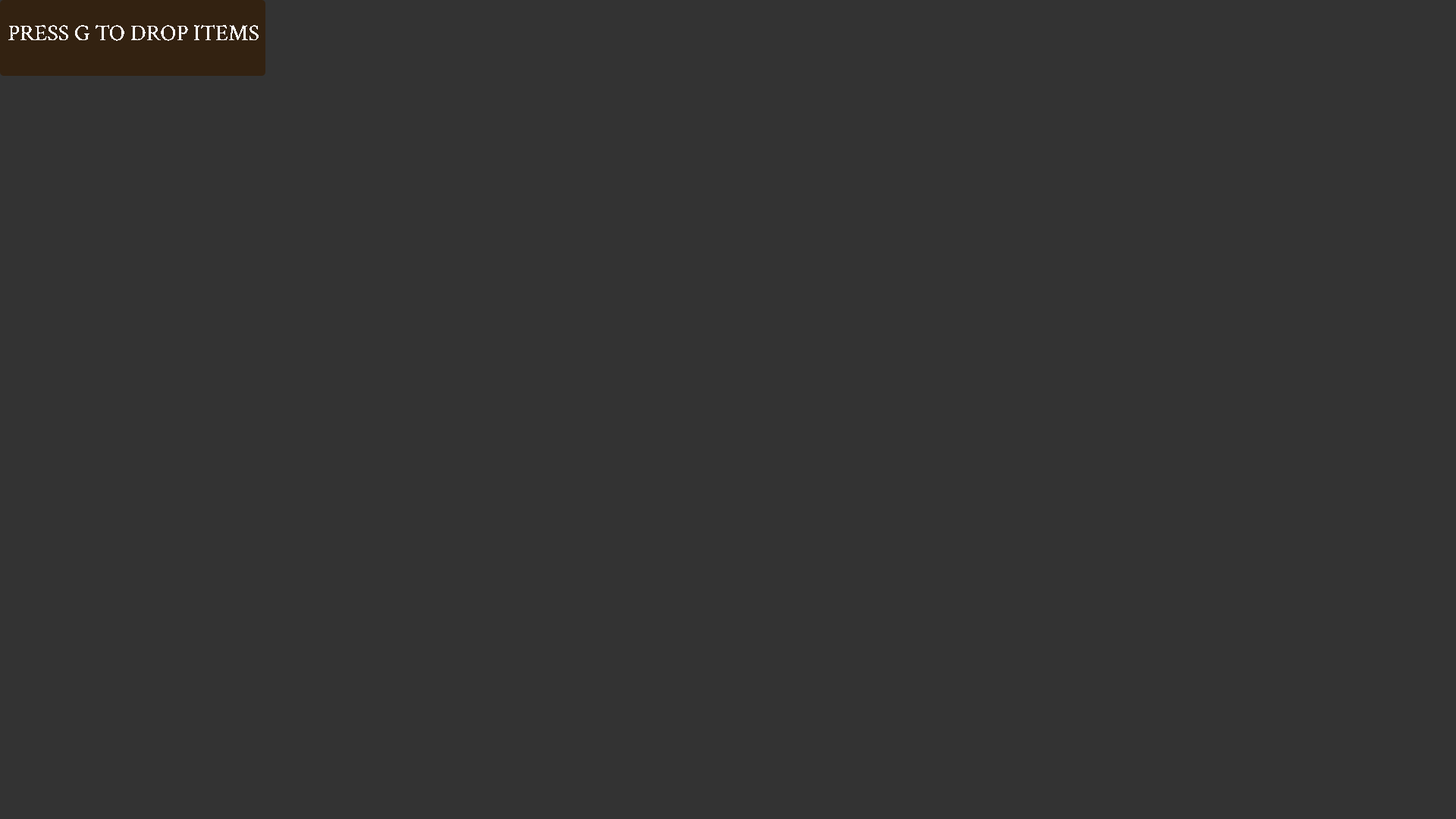
<style>
.page{position:relative;width:1456px;height:819px;background:#333333}
.page>*{position:absolute;margin:0}
.t1{font:22.7px "CrimsonText-Regular";color:#ffffff}
</style>
<div class="page">
<p class="t1" style="left:8px;top:25px;width:251px;height:16px">PRESS G TO DROP ITEMS</p>
</div>
